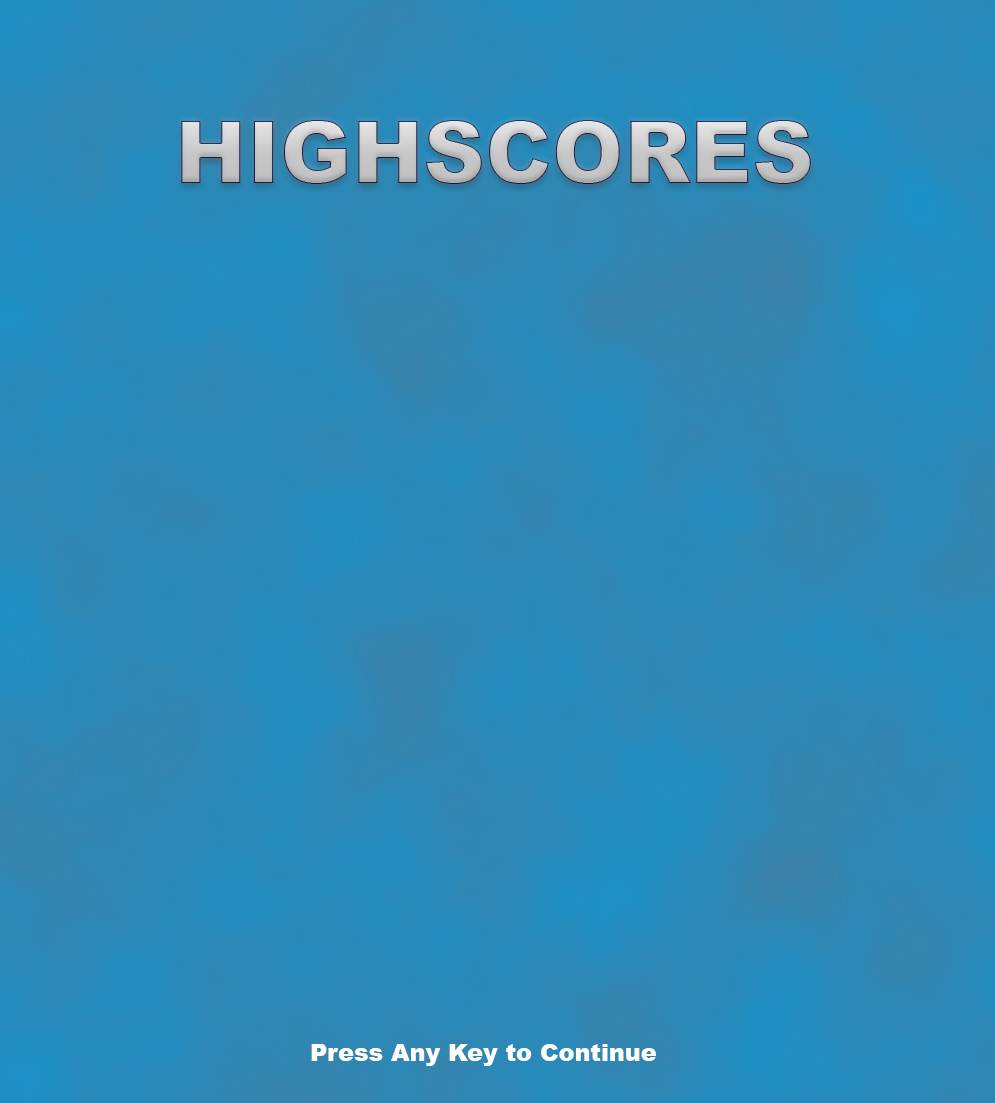
<style>
.page{position:relative;width:995px;height:1103px}
.page>*{position:absolute;margin:0}
.t1{font:85.9px "Arial-Black"}
.t2{font:23.8px "Arial-Black";color:#ffffff}
</style>
<div class="page">
<p class="t1" style="left:181px;top:120px;width:630px;height:64px">HIGHSCORES</p>
<p class="t2" style="left:311px;top:1044px;width:345px;height:22px">Press Any Key to Continue</p>
</div>
